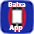
<style>
.page{position:relative;width:34px;height:34px}
.page>*{position:absolute;margin:0}
.t1{font:7.1px "MyriadHebrew-Bold";color:#fbfbf8}
</style>
<div class="page">
<p class="t1" style="left:8px;top:2px;width:18px;height:5px">Baixa</p>
<p class="t1" style="left:9px;top:25px;width:14px;height:7px">App</p>
</div>
